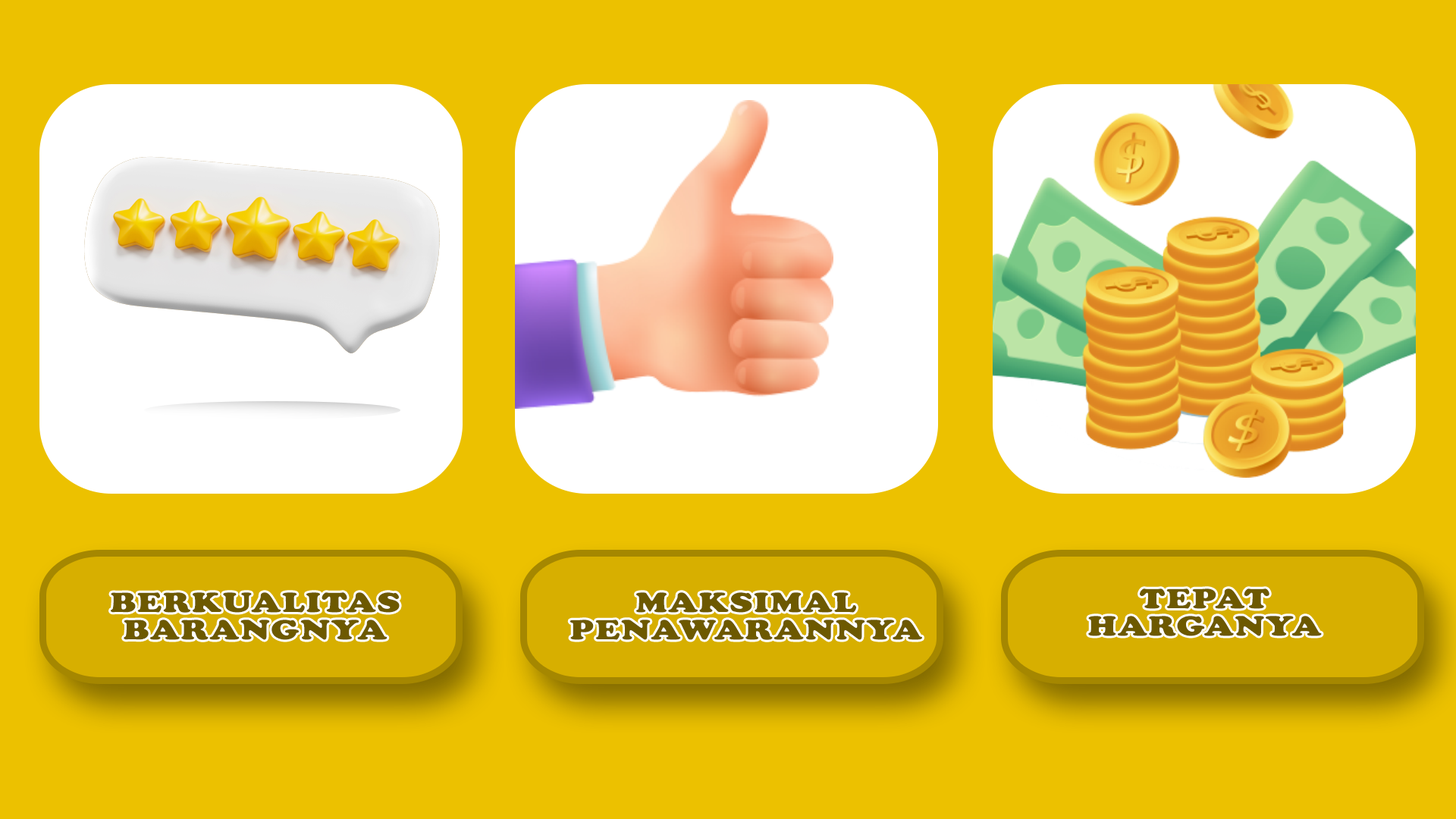
<style>
.page{position:relative;width:1456px;height:819px;background:#ecc100}
.page>*{position:absolute;margin:0}
.t1{font:28.8px/27.3px "CooperBlack";letter-spacing:0.04em;color:#6d5900;text-transform:uppercase;scale:1.23 1}
</style>
<div class="page">
<p class="t1" style="left:111px;top:592px;width:289px;height:48px;text-align:center">Berkualitas<br>barangnya</p>
<p class="t1" style="left:570px;top:592px;width:352px;height:48px;text-align:center">maksimal<br>penawarannya</p>
<p class="t1" style="left:1088px;top:588px;width:234px;height:48px;text-align:center">tepat<br>harganya</p>
</div>
